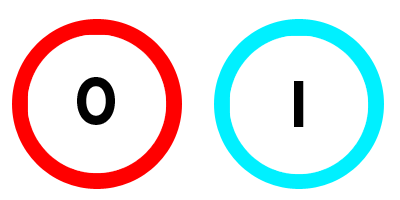
<style>
.page{position:relative;width:400px;height:200px;background:#ffffff}
.page>*{position:absolute;margin:0}
.t1{font:58.4px "LEMONMILK-Medium";color:#010101}
</style>
<div class="page">
<p class="t1" style="left:77px;top:77px;width:38px;height:48px">0</p>
<p class="t1" style="left:294px;top:81px;width:10px;height:46px">I</p>
</div>
